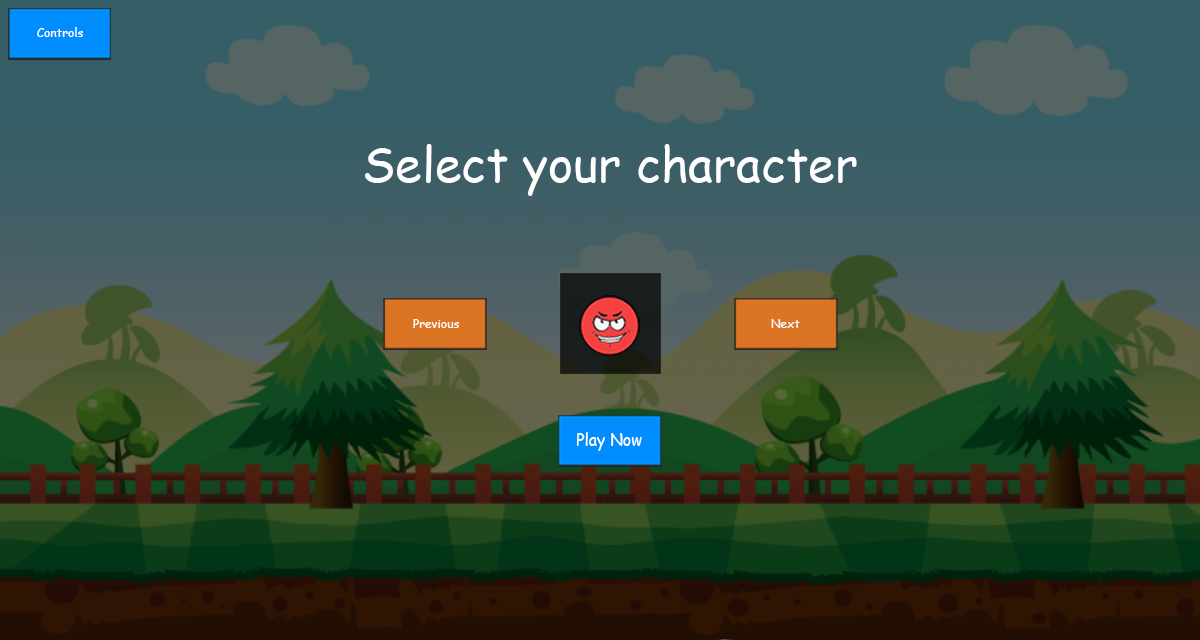
<style>
.page{position:relative;width:1200px;height:640px}
.page>*{position:absolute;margin:0}
.t1{font:12.1px "ComicSansMS";color:#ffffff}
.t2{font:48.2px "ComicSansMS";color:#ffffff}
.t3{font:16.8px "ComicSansMS";color:#ffffff;scale:0.95 1}
</style>
<div class="page">
<p class="t1" style="left:37px;top:27px;width:46px;height:10px">Controls</p>
<p class="t2" style="left:365px;top:144px;width:492px;height:52px">Select your character</p>
<p class="t1" style="left:413px;top:319px;width:46px;height:9px">Previous</p>
<p class="t1" style="left:771px;top:319px;width:29px;height:9px">Next</p>
<p class="t3" style="left:576px;top:432px;width:66px;height:19px">Play Now</p>
</div>
